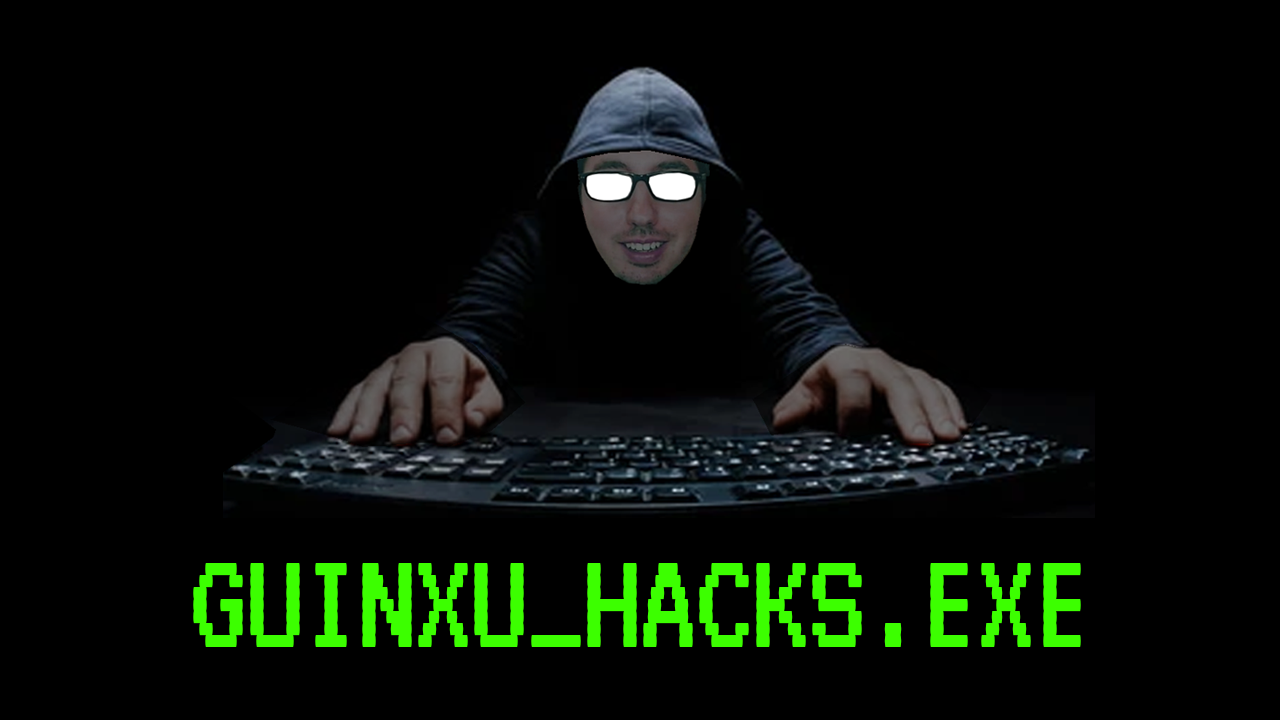
<style>
.page{position:relative;width:1280px;height:720px;background:#000000}
.page>*{position:absolute;margin:0}
.t1{font:150px "VT323-Regular";letter-spacing:-0.025em;color:#3cff00}
</style>
<div class="page">
<p class="t1" style="left:193px;top:563px;width:888px;height:84px">GUINXU_HACKS.EXE</p>
</div>
